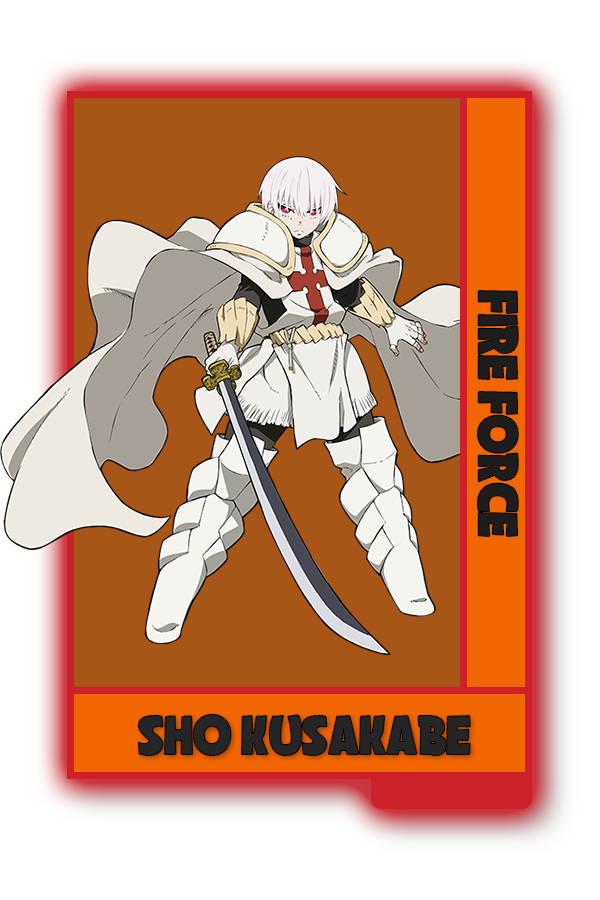
<style>
.page{position:relative;width:600px;height:900px;background:#ffffff}
.page>*{position:absolute;margin:0}
.t1{font:69.6px "AristonComicDemo-Regular";color:#1d1d1d}
.t2{font:69.1px "AristonComicDemo-Regular";color:#252525}
</style>
<div class="page">
<p class="t1" style="left:478px;top:291px;width:40px;height:245px;rotate:90deg">FIRE FORCE</p>
<p class="t2" style="left:138px;top:715px;width:332px;height:40px">SHO KUSAKABE</p>
</div>
